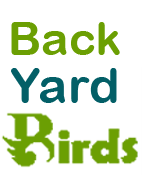
<style>
.page{position:relative;width:150px;height:175px;background:#ffffff}
.page>*{position:absolute;margin:0}
.t1{font:45.7px "ArialRoundedMTBold";letter-spacing:0.01em;color:#6b9f03}
.t2{font:49.3px "ArialRoundedMTBold";letter-spacing:0.01em;color:#035f67}
</style>
<div class="page">
<p class="t1" style="left:11px;top:22px;width:109px;height:33px">Back</p>
<p class="t2" style="left:11px;top:68px;width:106px;height:35px">Yard</p>
</div>
